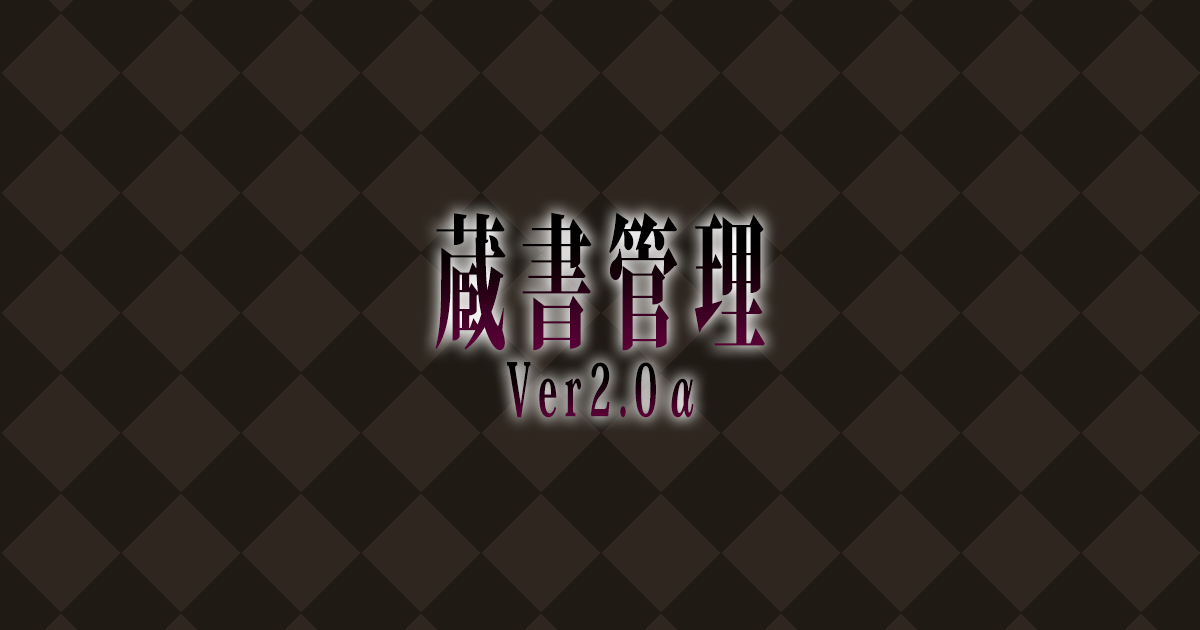
<style>
.page{position:relative;width:1200px;height:630px;background:#1f1a14}
.page>*{position:absolute;margin:0}
.t1{font:144px "KozMinPro-Heavy";letter-spacing:0.2em;scale:0.5 1}
.t2{font:72px "KozMinPro-Heavy";letter-spacing:0.2em;scale:0.5 1}
</style>
<div class="page">
<p class="t1" style="left:435px;top:212px;width:330px;height:139px">蔵書管理</p>
<p class="t2" style="left:507px;top:362px;width:187px;height:56px">Ver2.0α</p>
</div>
